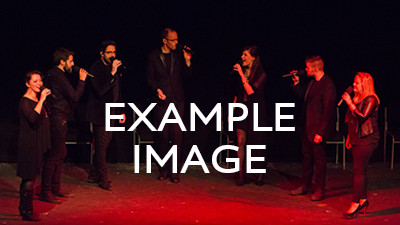
<style>
.page{position:relative;width:400px;height:225px}
.page>*{position:absolute;margin:0}
.t1{font:41.7px/41.7px "Aspect2-Bold";color:#ffffff;scale:0.96 1}
</style>
<div class="page">
<p class="t1" style="left:105px;top:103px;width:190px;height:70px;text-align:center">EXAMPLE<br>IMAGE</p>
</div>
